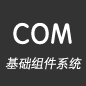
<style>
.page{position:relative;width:86px;height:86px;background:#333333}
.page>*{position:absolute;margin:0}
.t1{font:28px "STYuanti-SC-Regular";color:#ffffff;font-weight:bold;scale:0.97 1}
.t2{font:13px "STHeitiSC-Light";color:#ffffff;font-style:italic;scale:0.97 1}
</style>
<div class="page">
<p class="t1" style="left:13px;top:22px;width:59px;height:23px">COM</p>
<p class="t2" style="left:5px;top:57px;width:77px;height:13px">基础组件系统</p>
</div>
